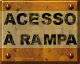
<style>
.page{position:relative;width:80px;height:64px}
.page>*{position:absolute;margin:0}
.t1{font:16px/20px "Arial-Black";letter-spacing:-0.015em;text-transform:uppercase}
.t2{font:12px/20px "Arial-Black";letter-spacing:0.005em;text-transform:uppercase}
.t3{font:16px/20px "Arial-Black";letter-spacing:0.085em;text-transform:uppercase}
.t4{font:14.7px/20px "Arial-Black";letter-spacing:-0.015em;text-transform:uppercase}
.t5{font:14.7px/20px "Arial-Black";letter-spacing:0.065em;text-transform:uppercase}
</style>
<div class="page">
<p class="t1" style="left:3px;top:13px;width:75px;height:32px;text-align:center"><span class="t2"><br></span>aC<span class="t3">E</span>SSO<br><span class="t4">À R</span><span class="t5">A</span><span class="t4">MPA</span></p>
</div>
